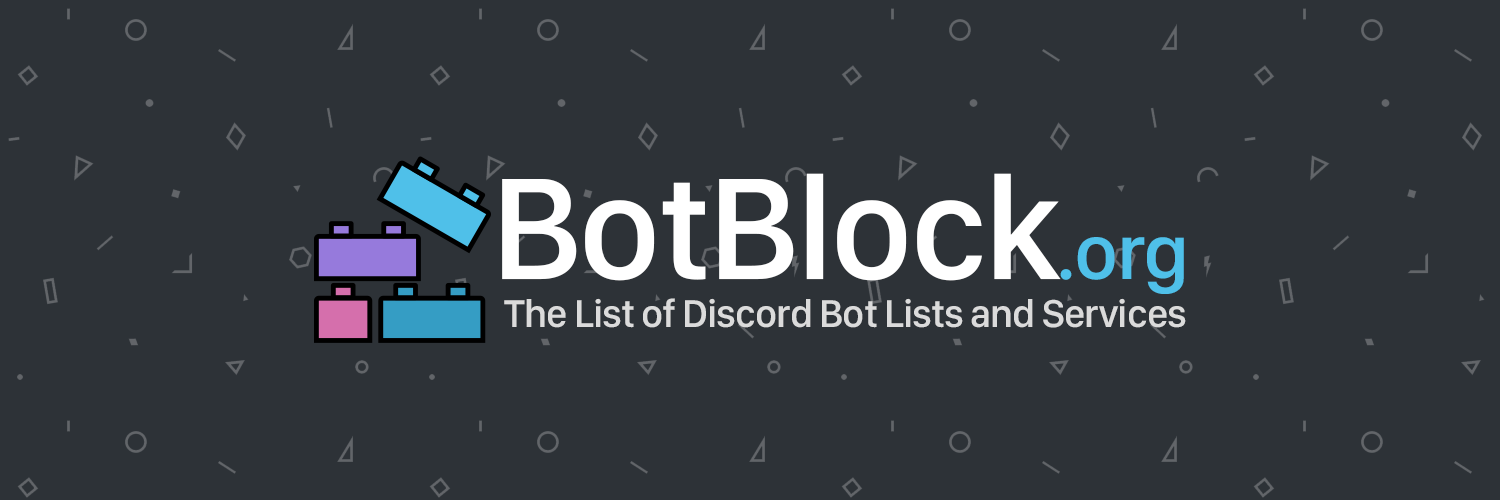
<style>
.page{position:relative;width:1500px;height:500px;background:#2d3237}
.page>*{position:absolute;margin:0}
.t1{font:40px "SFCompactDisplay-Medium";letter-spacing:-0.023em;color:#dbdbdb}
.t2{font:150px "SFCompactDisplay-Medium";letter-spacing:-0.023em;color:#ffffff}
.t3{font:80px "SFCompactDisplay-Medium";letter-spacing:-0.023em;color:#4fc0e9}
</style>
<div class="page">
<p class="t1" style="left:502px;top:173px;width:684px;height:155px"><span class="t2">BotBlock</span><span class="t3">.org<br> </span>The List of Discord Bot Lists and Services</p>
</div>
